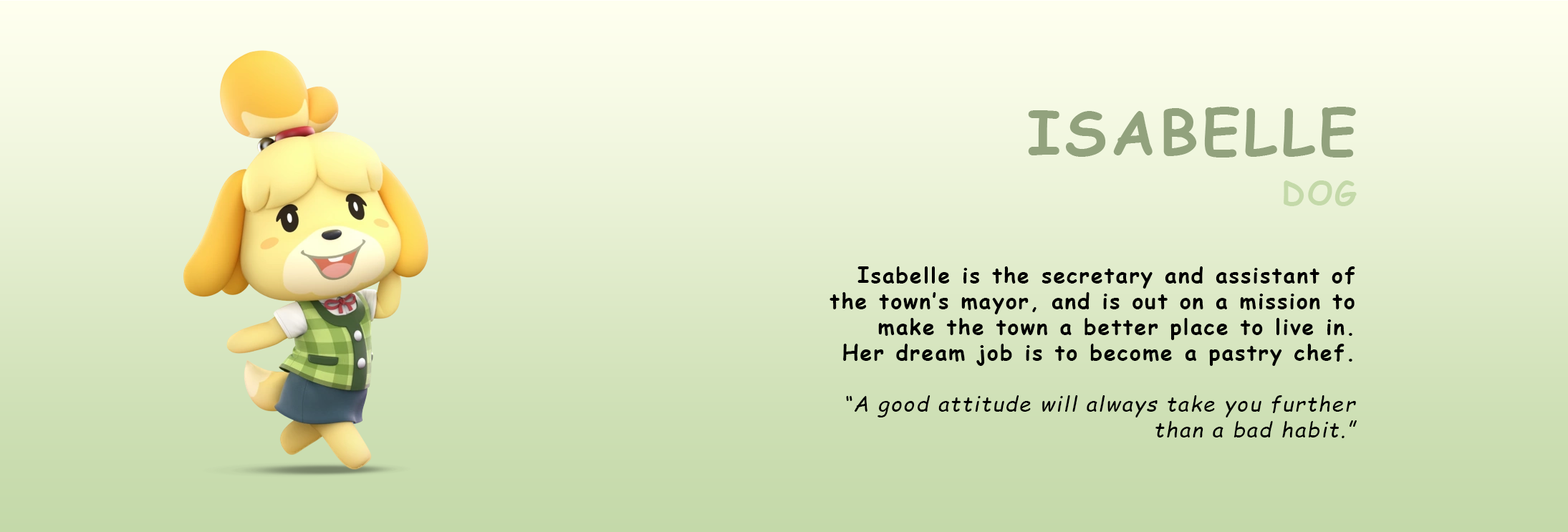
<style>
.page{position:relative;width:1568px;height:532px}
.page>*{position:absolute;margin:0}
.t1{font:60.9px/50.1px "ComicSansMS-Bold";letter-spacing:0.065em;color:#92a27d}
.t2{font:32.2px/50.1px "ComicSansMS-Bold";letter-spacing:0.065em;color:#c4d9a9}
.t3{font:21.5px "ComicSansMS-Bold";letter-spacing:0.065em;color:#000000}
.t4{font:21.5px "ComicSansMS-Italic";letter-spacing:0.065em;color:#000000}
</style>
<div class="page">
<p class="t1" style="left:1028px;top:107px;width:329px;height:99px;text-align:right">ISABELLE<br><span class="t2">DOG</span></p>
<p class="t3" style="left:829px;top:266px;width:528px;height:172px;text-align:right">Isabelle is the secretary and assistant of the town’s mayor, and is out on a mission to make the town a better place to live in. Her dream job is to become a pastry chef.<br><br><span class="t4">“A good attitude will always take you further than a bad habit.”</span></p>
</div>
